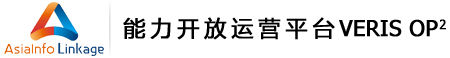
<style>
.page{position:relative;width:450px;height:58px;background:#ffffff}
.page>*{position:absolute;margin:0}
.t1{font:22px "MicrosoftYaHei";letter-spacing:0.2em;color:#000000;font-weight:bold}
.t2{font:22px "Tahoma";color:#000000;font-weight:bold}
.t3{font:22px "Tahoma";letter-spacing:0.05em;color:#000000;font-weight:bold}
</style>
<div class="page">
<p class="t1" style="left:123px;top:17px;width:323px;height:23px">能力开放运营平台<span class="t2">VERIS O</span><span class="t3">P2</span></p>
</div>
